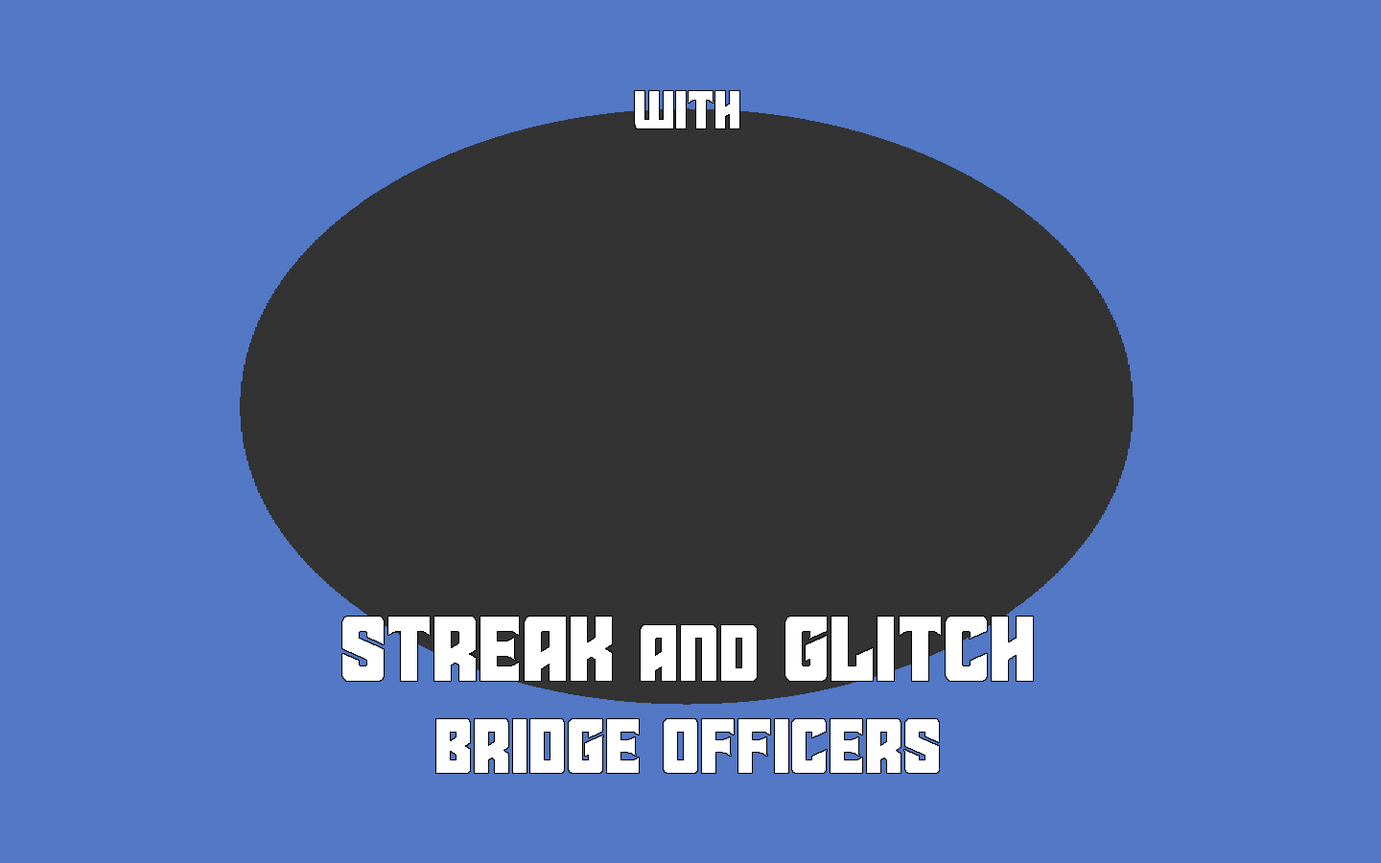
<style>
.page{position:relative;width:1381px;height:863px;background:#5278c6}
.page>*{position:absolute;margin:0}
.t1{font:92.1px "StarGuard";letter-spacing:0.009em;color:#ffffff}
.t2{font:61.4px "StarGuard";letter-spacing:0.009em;color:#ffffff}
.t3{font:76.7px "StarGuard";letter-spacing:0.009em;color:#ffffff}
</style>
<div class="page">
<p class="t1" style="left:342px;top:91px;width:691px;height:682px;text-align:center"><span class="t2">with<br></span><br><br><br><br>STREAK and GLITCH<br><span class="t3">BRIDGE OFFICERS</span></p>
</div>
